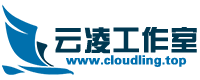
<style>
.page{position:relative;width:200px;height:80px;background:#ffffff}
.page>*{position:absolute;margin:0}
.t1{font:28.3px "FZZYJW--GB1-0";color:#003851;font-weight:bold}
.t2{font:12.5px "FZZYJW--GB1-0";color:#0070af;font-weight:bold}
</style>
<div class="page">
<p class="t1" style="left:55px;top:27px;width:142px;height:27px">云凌工作室</p>
<p class="t2" style="left:66px;top:55px;width:121px;height:12px">www.cloudling.top</p>
</div>
